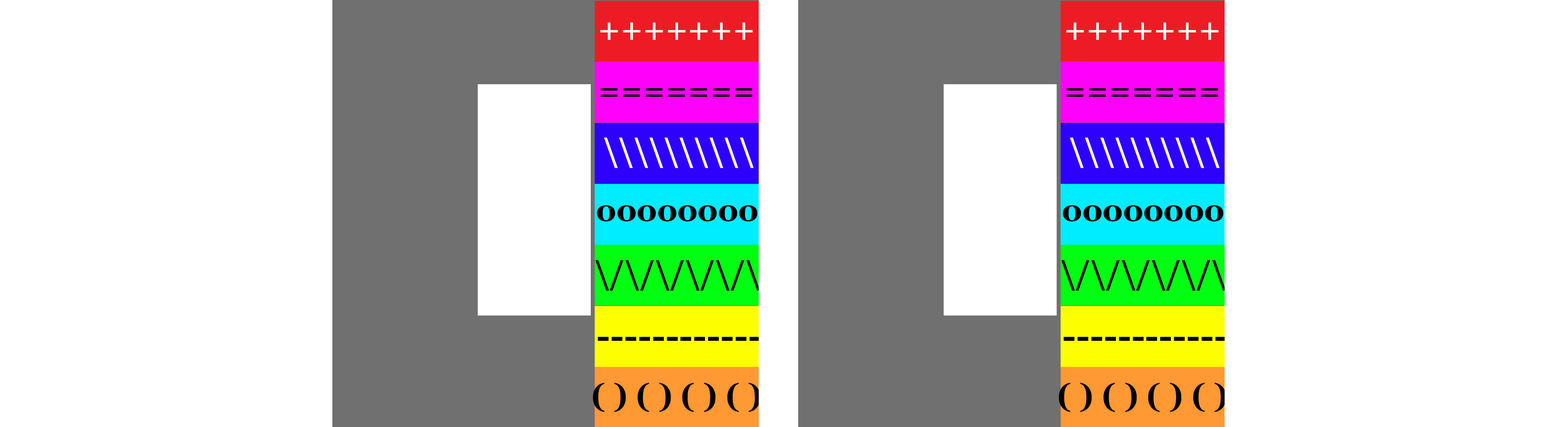
<style>
.page{position:relative;width:1568px;height:427px;background:#ffffff}
.page>*{position:absolute;margin:0}
.t1{font:32px "Georgia-Bold";color:#ffffff}
.t2{font:32px "Georgia-Bold";color:#000000}
.t3{font:36.4px "Georgia-Bold";color:#000000}
</style>
<div class="page">
<p class="t1" style="left:600px;top:23px;width:153px;height:17px">+++++++</p>
<p class="t1" style="left:1066px;top:23px;width:153px;height:17px">+++++++</p>
<p class="t2" style="left:601px;top:88px;width:151px;height:9px">=======</p>
<p class="t2" style="left:1067px;top:88px;width:151px;height:9px">=======</p>
<p class="t1" style="left:604px;top:138px;width:150px;height:30px">\\\\\\\\\\</p>
<p class="t1" style="left:1070px;top:138px;width:150px;height:30px">\\\\\\\\\\</p>
<p class="t2" style="left:597px;top:205px;width:161px;height:16px">oooooooo</p>
<p class="t2" style="left:1063px;top:205px;width:160px;height:16px">oooooooo</p>
<p class="t2" style="left:595px;top:260px;width:165px;height:30px">\/\/\/\/\/\</p>
<p class="t2" style="left:1061px;top:260px;width:165px;height:30px">\/\/\/\/\/\</p>
<p class="t3" style="left:597px;top:337px;width:163px;height:4px">------------</p>
<p class="t3" style="left:1063px;top:337px;width:163px;height:4px">------------</p>
<p class="t2" style="left:593px;top:383px;width:167px;height:29px">( ) ( ) ( ) ( )</p>
<p class="t2" style="left:1059px;top:383px;width:167px;height:29px">( ) ( ) ( ) ( )</p>
</div>
